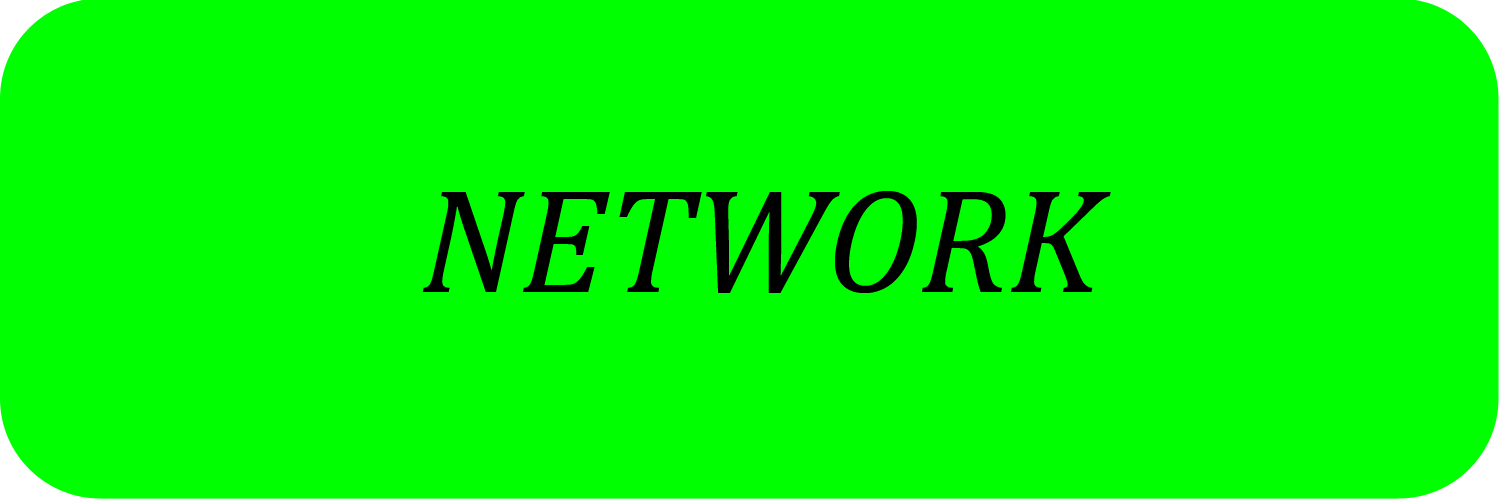
<style>
.page{position:relative;width:1500px;height:500px;background:#00ff00}
.page>*{position:absolute;margin:0}
.t1{font:150px "Cambria-Italic";color:#000000}
</style>
<div class="page">
<p class="t1" style="left:422px;top:191px;width:689px;height:102px">NETWORK</p>
</div>
